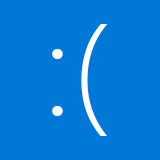
<style>
.page{position:relative;width:160px;height:160px;background:#0078d7}
.page>*{position:absolute;margin:0}
.t1{font:130px "SegoeUI-Light";color:#ffffff}
</style>
<div class="page">
<p class="t1" style="left:52px;top:24px;width:56px;height:112px">:(</p>
</div>
